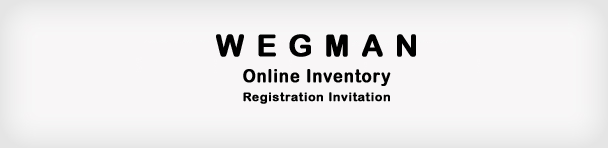
<style>
.page{position:relative;width:608px;height:148px;background:#f8f6f7}
.page>*{position:absolute;margin:0}
.t1{font:30px "ArialRoundedMTBold";letter-spacing:0.05em;color:#000000;font-weight:bold}
.t2{font:18px "ArialRoundedMTBold";letter-spacing:0.05em;color:#000000;font-weight:bold;scale:0.9 1}
.t3{font:12px "ArialRoundedMTBold";letter-spacing:0.05em;color:#000000;font-weight:bold}
</style>
<div class="page">
<p class="t1" style="left:216px;top:34px;width:200px;height:23px">W E G M A N</p>
<p class="t2" style="left:243px;top:69px;width:148px;height:17px">Online Inventory</p>
<p class="t3" style="left:243px;top:92px;width:147px;height:12px">Registration Invitation</p>
</div>
